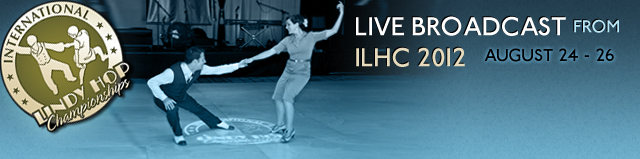
<style>
.page{position:relative;width:640px;height:159px}
.page>*{position:absolute;margin:0}
.t1{font:27.8px/27.8px "PaddingtonPlain";color:#ffffff;text-transform:uppercase}
.t2{font:18.5px/24.7px "PaddingtonPlain";color:#b8e7f8;text-transform:uppercase}
.t3{font:27.8px/30.9px "PaddingtonPlain";color:#e6dbbd;text-transform:uppercase}
.t4{font:18.7px "PaddingtonPlain";color:#000000;text-transform:uppercase}
</style>
<div class="page">
<p class="t1" style="left:356px;top:16px;width:263px;height:51px">Live Broadcast <span class="t2">from  <br></span><span class="t3">ILHC 2012</span></p>
<p class="t4" style="left:484px;top:48px;width:130px;height:14px">August 24 - 26</p>
</div>
